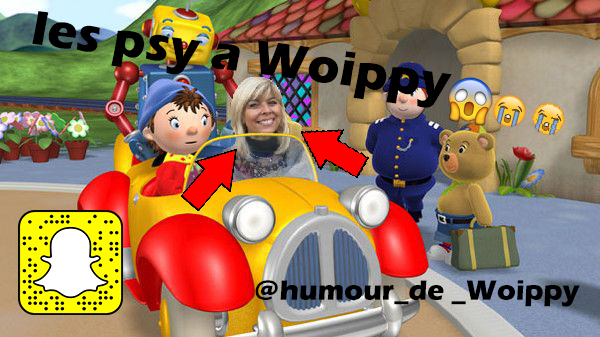
<style>
.page{position:relative;width:600px;height:337px}
.page>*{position:absolute;margin:0}
.t1{font:50px "ErasITC-Bold";color:#000000}
.t2{font:28.7px "ErasITC-Bold";color:#000000}
</style>
<div class="page">
<p class="t1" style="left:32px;top:11px;width:420px;height:97px;rotate:8deg">les psy a Woippy</p>
<p class="t2" style="left:255px;top:280px;width:325px;height:27px">@humour_de _Woippy</p>
</div>
